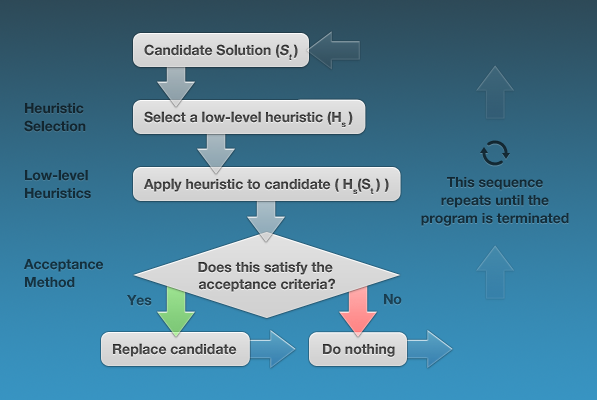
<style>
.page{position:relative;width:597px;height:400px}
.page>*{position:absolute;margin:0}
.t1{font:14px "HelveticaNeueBold";color:#444444}
.t2{font:14px "HelveticaNeueBold";color:#444444;font-style:italic}
.t3{font:24px/18px "HelveticaNeueBold";color:#13252e}
.t4{font:14px "HelveticaNeueBold";color:#454545}
.t5{font:24px/18px "HelveticaNeueBold";color:#132a36}
.t6{font:24px/18px "HelveticaNeueBold";color:#132c38}
.t7{font:24px/18px "HelveticaNeueBold";color:#143140}
.t8{font:14px "HelveticaNeueBold";color:#414141}
.t9{font:24px "HelveticaNeueBold";color:#1a4053}
.t10{font:24px "HelveticaNeueBold";color:#193e50}
.t11{font:14px "HelveticaNeueBold";color:#434343}
.t12{font:14px "HelveticaNeueBold";color:#464646}
</style>
<div class="page">
<p class="t1" style="left:144px;top:44px;width:154px;height:16px">Candidate Solution (<span class="t2">St </span>)</p>
<p class="t3" style="left:24px;top:103px;width:62px;height:29px">Heuristic<br>Selection</p>
<p class="t4" style="left:144px;top:111px;width:209px;height:16px">Select a low-level heuristic (Hs )</p>
<p class="t5" style="left:25px;top:170px;width:66px;height:29px">Low-level<br>Heuristics</p>
<p class="t4" style="left:144px;top:178px;width:245px;height:16px">Apply heuristic to candidate ( Hs(St )  )</p>
<p class="t6" style="left:421px;top:177px;width:148px;height:49px;text-align:center">This sequence<br>repeats until the<br>program is terminated</p>
<p class="t7" style="left:24px;top:259px;width:79px;height:29px">Acceptance<br>Method</p>
<p class="t8" style="left:198px;top:262px;width:137px;height:30px;text-align:center">Does this satisfy the <br>acceptance criteria?</p>
<p class="t9" style="left:384px;top:294px;width:18px;height:11px">No</p>
<p class="t10" style="left:127px;top:295px;width:25px;height:11px">Yes</p>
<p class="t11" style="left:113px;top:343px;width:124px;height:14px">Replace candidate</p>
<p class="t12" style="left:323px;top:344px;width:72px;height:13px">Do nothing</p>
</div>
